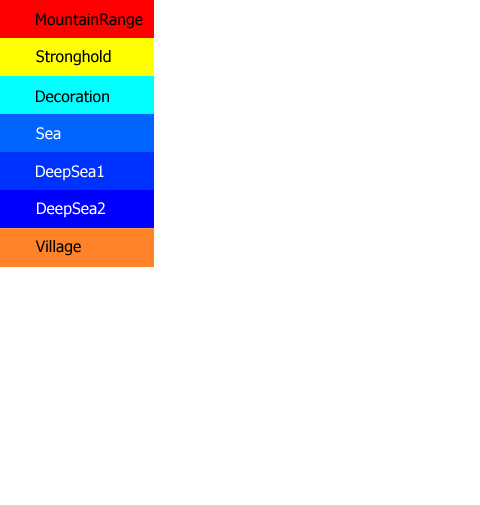
<style>
.page{position:relative;width:480px;height:505px;background:#ffffff}
.page>*{position:absolute;margin:0}
.t1{font:15.8px "Tahoma";color:#000000}
.t2{font:15.8px "Tahoma";color:#ffffff}
</style>
<div class="page">
<p class="t1" style="left:36px;top:13px;width:107px;height:16px">MountainRange</p>
<p class="t1" style="left:36px;top:50px;width:75px;height:16px">Stronghold</p>
<p class="t1" style="left:36px;top:90px;width:73px;height:13px">Decoration</p>
<p class="t2" style="left:36px;top:127px;width:25px;height:13px">Sea</p>
<p class="t2" style="left:36px;top:165px;width:68px;height:16px">DeepSea1</p>
<p class="t2" style="left:37px;top:202px;width:68px;height:16px">DeepSea2</p>
<p class="t1" style="left:35px;top:240px;width:46px;height:16px">Village</p>
</div>
